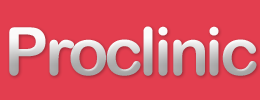
<style>
.page{position:relative;width:260px;height:100px;background:#e33e4f}
.page>*{position:absolute;margin:0}
.t1{font:66.7px "ArialRoundedMTBold";letter-spacing:-0.05em}
</style>
<div class="page">
<p class="t1" style="left:9px;top:26px;width:248px;height:50px">Proclinic</p>
</div>
